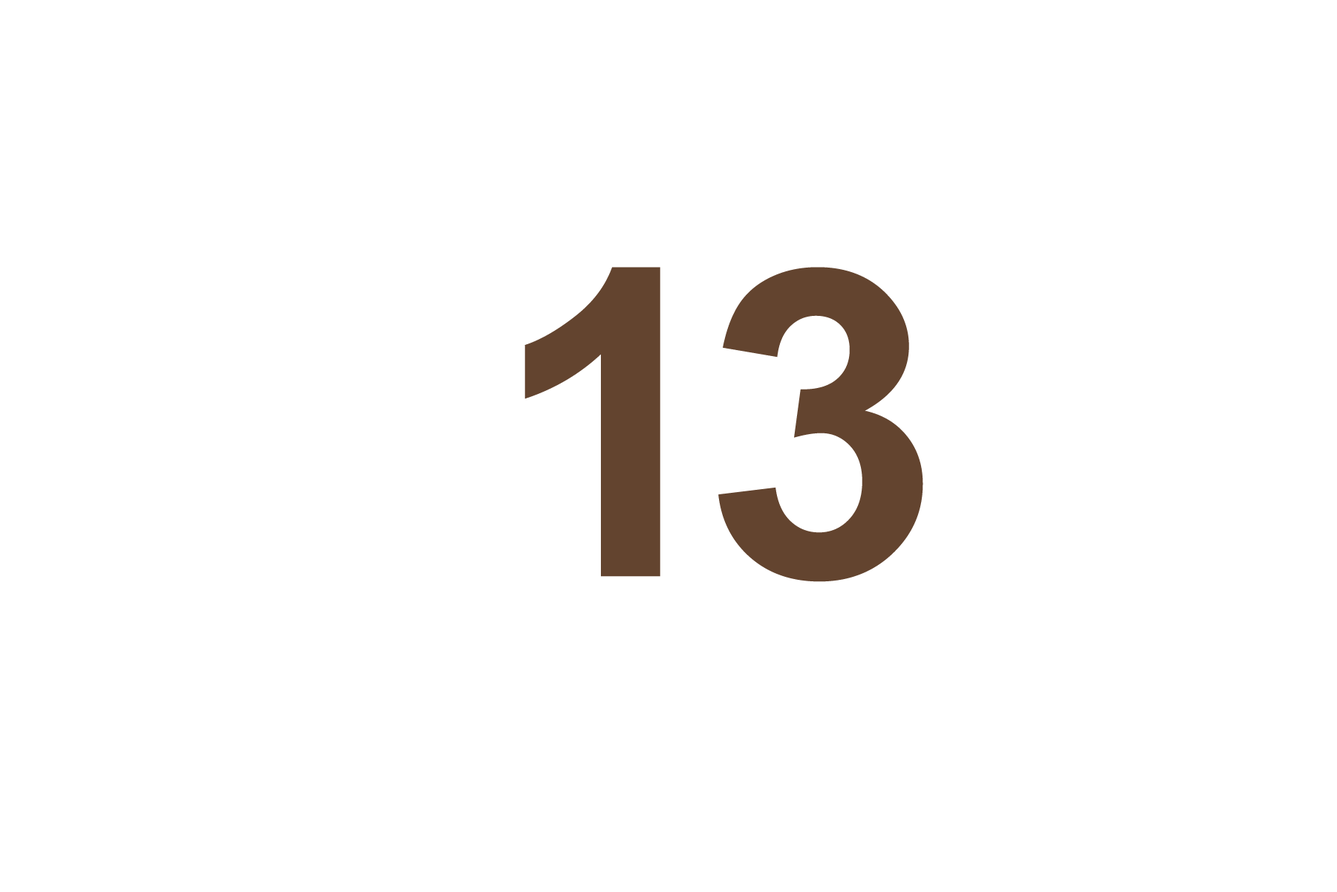
<style>
.page{position:relative;width:1337px;height:892px;background:#ffffff}
.page>*{position:absolute;margin:0}
.t1{font:429.6px "Arial-BoldMT";color:#63442f}
</style>
<div class="page">
<p class="t1" style="left:525px;top:267px;width:399px;height:315px">13</p>
</div>
